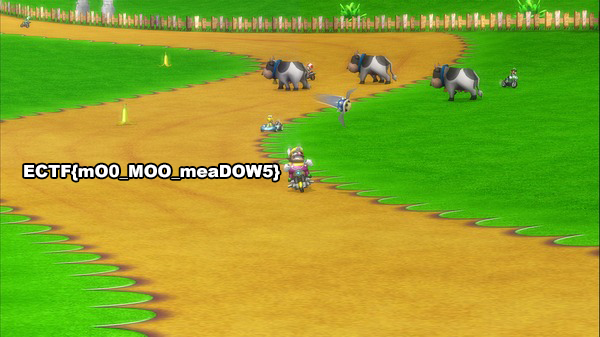
<style>
.page{position:relative;width:600px;height:337px}
.page>*{position:absolute;margin:0}
.t1{font:16.7px "Arial-Black";color:#ffffff}
</style>
<div class="page">
<p class="t1" style="left:24px;top:164px;width:256px;height:17px">ECTF{mO0_MOO_meaDOW5}</p>
</div>
